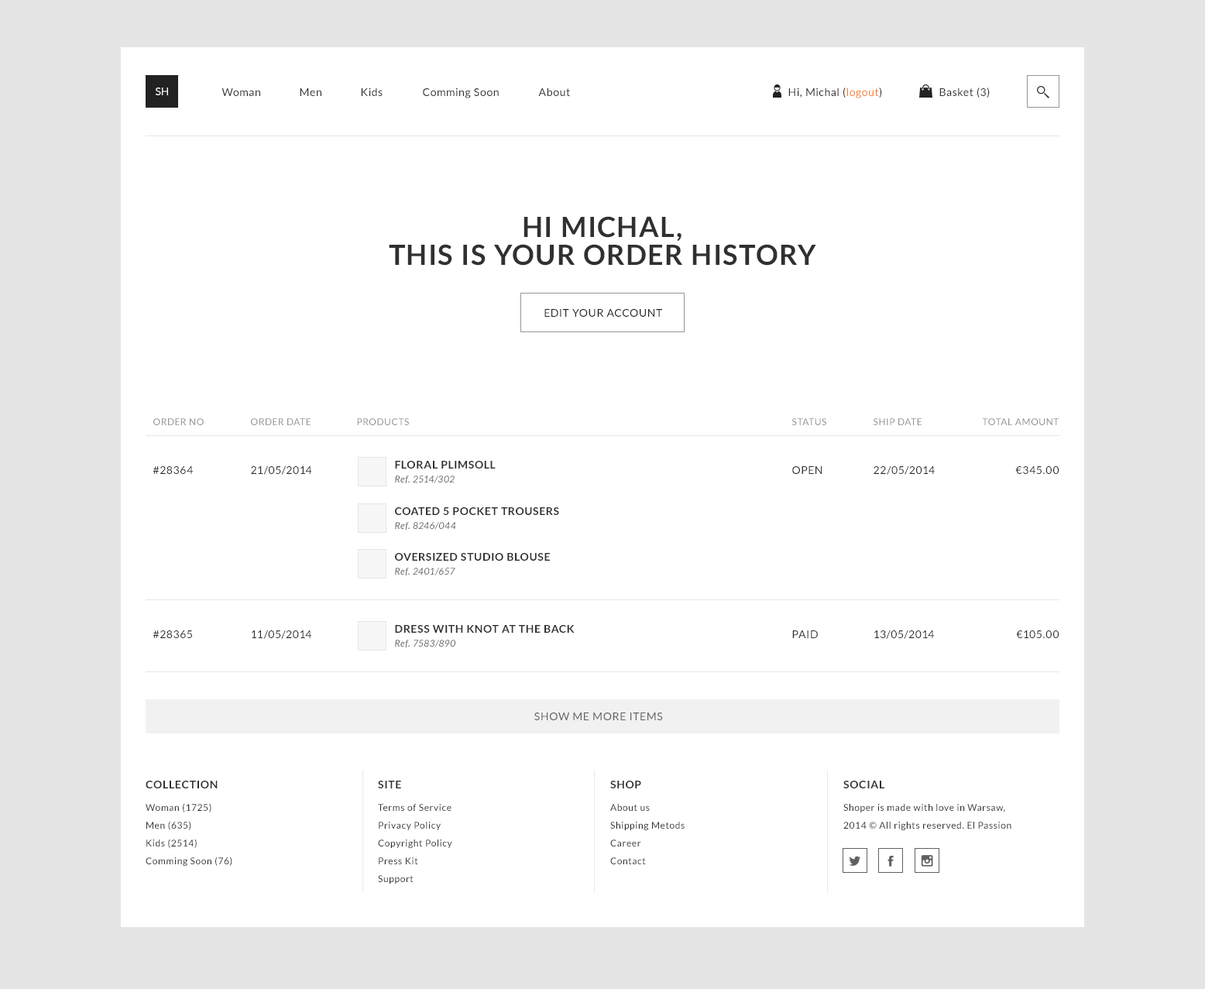
<style>
.page{position:relative;width:1205px;height:989px;background:#ffffff}
.page>*{position:absolute;margin:0}
.t1{font:10.8px "Lato-Regular";color:#ffffff;text-transform:uppercase}
.t2{font:10.8px "Lato-Regular";letter-spacing:0.05em;color:#303030}
.t3{font:10.8px "Lato-Regular";letter-spacing:0.05em;color:#f68236}
.t4{font:27.9px/27.9px "Lato-Bold";letter-spacing:0.05em;color:#303030;text-transform:uppercase}
.t5{font:10.8px "Lato-Regular";letter-spacing:0.05em;color:#222222;text-transform:uppercase}
.t6{font:9.3px "Lato-Regular";letter-spacing:0.05em;color:#909090;text-transform:uppercase}
.t7{font:10.8px/13.9px "Lato-Bold";letter-spacing:0.05em;color:#303030;text-transform:uppercase}
.t8{font:9.3px/13.9px "Lato-Italic";letter-spacing:0.05em;color:#606060}
.t9{font:10.8px "Lato-Regular";letter-spacing:0.05em;color:#303030;text-transform:uppercase}
.t10{font:10.8px "Lato-Regular";letter-spacing:0.05em;color:#606060;text-transform:uppercase}
.t11{font:10.8px "Lato-Bold";letter-spacing:0.05em;color:#303030;text-transform:uppercase}
.t12{font:9.3px/17.8px "Lato-Regular";letter-spacing:0.05em;color:#303030}
</style>
<div class="page">
<p class="t1" style="left:156px;top:88px;width:12px;height:7px">sh</p>
<p class="t2" style="left:222px;top:88px;width:38px;height:8px">Woman</p>
<p class="t2" style="left:300px;top:88px;width:21px;height:8px">Men</p>
<p class="t2" style="left:361px;top:88px;width:22px;height:8px">Kids</p>
<p class="t2" style="left:423px;top:88px;width:76px;height:10px">Comming Soon</p>
<p class="t2" style="left:538px;top:88px;width:32px;height:8px">About</p>
<p class="t2" style="left:789px;top:88px;width:93px;height:10px">Hi, Michal (<span class="t3">logout</span>)</p>
<p class="t2" style="left:940px;top:88px;width:50px;height:10px">Basket (3)</p>
<p class="t4" style="left:389px;top:216px;width:428px;height:50px;text-align:center">Hi Michal,<br>this is your Order history</p>
<p class="t5" style="left:545px;top:309px;width:117px;height:8px">edit your account</p>
<p class="t6" style="left:153px;top:418px;width:51px;height:7px">order no</p>
<p class="t6" style="left:251px;top:418px;width:60px;height:7px">order date</p>
<p class="t6" style="left:357px;top:418px;width:52px;height:7px">products</p>
<p class="t6" style="left:792px;top:418px;width:35px;height:7px">status</p>
<p class="t6" style="left:874px;top:418px;width:48px;height:7px">ship date</p>
<p class="t6" style="left:982px;top:418px;width:78px;height:7px">total AMOUNT</p>
<p class="t7" style="left:395px;top:461px;width:101px;height:23px">FLORAL PLIMSOLL<br><span class="t8">Ref. 2514/302</span></p>
<p class="t9" style="left:153px;top:466px;width:40px;height:8px">#28364</p>
<p class="t9" style="left:251px;top:466px;width:61px;height:9px">21/05/2014</p>
<p class="t9" style="left:792px;top:466px;width:30px;height:8px">Open</p>
<p class="t9" style="left:874px;top:466px;width:61px;height:9px">22/05/2014</p>
<p class="t9" style="left:1016px;top:466px;width:44px;height:8px">€345.00</p>
<p class="t7" style="left:395px;top:507px;width:164px;height:24px">COATED 5 POCKET TROUSERS<br><span class="t8">Ref. 8246/044</span></p>
<p class="t7" style="left:395px;top:553px;width:155px;height:23px">OVERSIZED STUDIO BLOUSE<br><span class="t8">Ref. 2401/657</span></p>
<p class="t9" style="left:252px;top:630px;width:59px;height:9px">11/05/2014</p>
<p class="t7" style="left:395px;top:625px;width:180px;height:23px">DRESS WITH KNOT AT THE BACK<br><span class="t8">Ref. 7583/890</span></p>
<p class="t9" style="left:875px;top:630px;width:59px;height:9px">13/05/2014</p>
<p class="t9" style="left:153px;top:631px;width:39px;height:7px">#28365</p>
<p class="t9" style="left:792px;top:631px;width:26px;height:7px">Paid</p>
<p class="t9" style="left:1016px;top:631px;width:44px;height:7px">€105.00</p>
<p class="t10" style="left:535px;top:713px;width:128px;height:7px">Show me more items</p>
<p class="t11" style="left:146px;top:781px;width:72px;height:8px">Collection</p>
<p class="t11" style="left:378px;top:781px;width:23px;height:8px">site</p>
<p class="t11" style="left:610px;top:781px;width:31px;height:8px">Shop</p>
<p class="t11" style="left:844px;top:781px;width:41px;height:8px">social</p>
<p class="t12" style="left:146px;top:803px;width:86px;height:63px">Woman (1725)<br>Men (635)<br>Kids (2514)<br>Comming Soon (76)</p>
<p class="t12" style="left:378px;top:804px;width:74px;height:80px">Terms of Service <br>Privacy Policy <br>Copyright Policy <br>Press Kit <br>Support</p>
<p class="t12" style="left:610px;top:804px;width:75px;height:61px">About us<br>Shipping Metods<br>Career<br>Contact</p>
<p class="t12" style="left:844px;top:804px;width:168px;height:26px">Shoper is made with love in Warsaw, <br>2014 © All rights reserved. El Passion</p>
</div>
